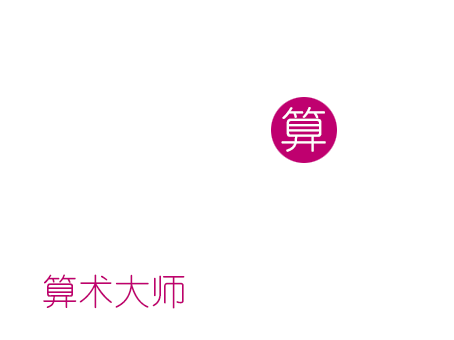
<style>
.page{position:relative;width:454px;height:340px;background:#ffffff}
.page>*{position:absolute;margin:0}
.t1{font:48px "YouYuan";color:#ffffff}
.t2{font:36px "YouYuan";color:#bf006f}
</style>
<div class="page">
<p class="t1" style="left:281px;top:107px;width:45px;height:45px">算</p>
<p class="t2" style="left:43px;top:274px;width:142px;height:35px">算术大师</p>
</div>
